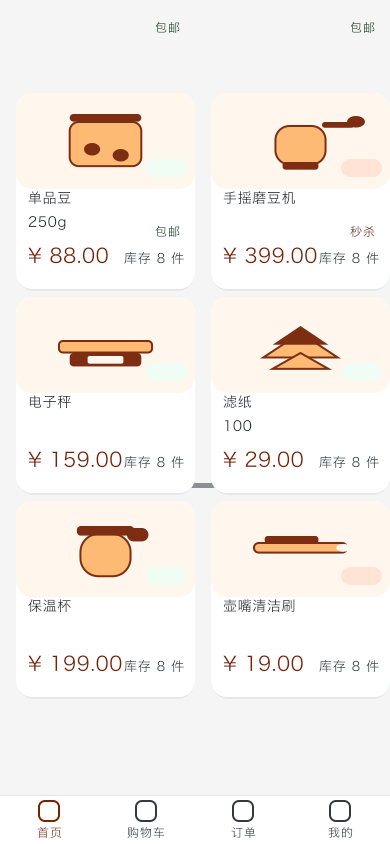
<style>
.page{position:relative;width:390px;height:844px;background:#ffffff}
.page>*{position:absolute;margin:0}
.t1{font:12px "HiraginoSansGB-Regular";letter-spacing:0.08em}
.t2{font:14px "HiraginoSansGB-Regular";letter-spacing:0.045em;color:#36393e}
.t3{font:14px "HiraginoSansGB-Regular";letter-spacing:0.045em;color:#33373b}
.t4{font:14px "HiraginoSansGB-Regular";letter-spacing:0.045em;color:#272b30}
.t5{font:12px "HiraginoSansGB-Regular";letter-spacing:0.08em;color:#793723}
.t6{font:20px "HiraginoSansGB-Regular";letter-spacing:0.024em;color:#7a2200}
.t7{font:13px "HiraginoSansGB-Regular";letter-spacing:0.06em;color:#474c51}
.t8{font:14px "HiraginoSansGB-Regular";letter-spacing:0.045em;color:#2a2d33}
.t9{font:14px "HiraginoSansGB-Regular";letter-spacing:0.045em;color:#282c31}
.t10{font:14px "HiraginoSansGB-Regular";letter-spacing:0.045em;color:#2c2f34}
.t11{font:14px "HiraginoSansGB-Regular";letter-spacing:0.045em;color:#1f2329}
.t12{font:14px "HiraginoSansGB-Regular";letter-spacing:0.045em;color:#3b3e42}
.t13{font:12px "HiraginoSansGB-Regular";letter-spacing:0.08em;color:#43484e}
</style>
<div class="page">
<p class="t1" style="left:154px;top:21px;width:27px;height:13px">包邮</p>
<p class="t1" style="left:349px;top:21px;width:27px;height:13px">包邮</p>
<p class="t2" style="left:27px;top:191px;width:45px;height:15px">单品豆</p>
<p class="t3" style="left:222px;top:191px;width:75px;height:15px">手摇磨豆机</p>
<p class="t4" style="left:27px;top:216px;width:40px;height:15px">250g</p>
<p class="t1" style="left:154px;top:225px;width:27px;height:13px">包邮</p>
<p class="t5" style="left:349px;top:225px;width:27px;height:13px">秒杀</p>
<p class="t6" style="left:27px;top:247px;width:82px;height:18px">¥ 88.00</p>
<p class="t7" style="left:123px;top:251px;width:62px;height:15px">库存 8 件</p>
<p class="t6" style="left:222px;top:247px;width:96px;height:18px">¥ 399.00</p>
<p class="t7" style="left:318px;top:251px;width:62px;height:15px">库存 8 件</p>
<p class="t8" style="left:28px;top:395px;width:44px;height:15px">电子秤</p>
<p class="t9" style="left:222px;top:395px;width:31px;height:14px">滤纸</p>
<p class="t10" style="left:224px;top:420px;width:29px;height:13px">100</p>
<p class="t6" style="left:27px;top:451px;width:96px;height:18px">¥ 159.00</p>
<p class="t7" style="left:123px;top:455px;width:62px;height:15px">库存 8 件</p>
<p class="t6" style="left:222px;top:451px;width:82px;height:18px">¥ 29.00</p>
<p class="t7" style="left:318px;top:455px;width:62px;height:15px">库存 8 件</p>
<p class="t11" style="left:27px;top:599px;width:45px;height:15px">保温杯</p>
<p class="t12" style="left:222px;top:599px;width:74px;height:15px">壶嘴清洁刷</p>
<p class="t6" style="left:27px;top:655px;width:96px;height:18px">¥ 199.00</p>
<p class="t7" style="left:123px;top:659px;width:62px;height:15px">库存 8 件</p>
<p class="t6" style="left:222px;top:655px;width:82px;height:18px">¥ 19.00</p>
<p class="t7" style="left:318px;top:659px;width:62px;height:15px">库存 8 件</p>
<p class="t1" style="left:36px;top:826px;width:27px;height:13px">首页</p>
<p class="t13" style="left:126px;top:826px;width:40px;height:13px">购物车</p>
<p class="t1" style="left:230px;top:827px;width:27px;height:12px">订单</p>
<p class="t1" style="left:327px;top:827px;width:27px;height:12px">我的</p>
</div>
